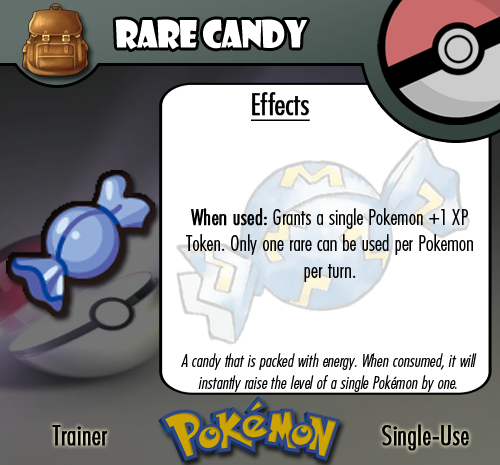
<style>
.page{position:relative;width:500px;height:465px;background:#ffffff}
.page>*{position:absolute;margin:0}
.t1{font:36.7px "ShowcardGothic-Reg";letter-spacing:-0.025em;color:#ffffff;scale:0.91 1}
.t2{font:22.2px "FuturaCondensedBQ-Light";color:#010101}
.t3{font:27.8px "FuturaCondensedBQ-Light";color:#010101;font-weight:bold}
.t4{font:30.6px "FuturaCondensedBQ-Light";color:#010101;font-weight:bold;text-decoration:underline}
.t5{font:22.2px "FuturaCondensedBQ-Light";color:#010101;font-weight:bold}
.t6{font:18.1px "FuturaCondensedBQ-Light";color:#010101;font-style:italic}
</style>
<div class="page">
<p class="t1" style="left:115px;top:19px;width:193px;height:31px">Rare Candy</p>
<p class="t2" style="left:186px;top:92px;width:287px;height:190px"><span class="t3">  </span><span class="t4">Effects<br><br><br><br><br><br><br></span><span class="t5">When used: </span>Grants a single Pokemon +1 XP Token. Only one rare can be used per Pokemon per turn.</p>
<p class="t6" style="left:181px;top:353px;width:296px;height:39px;text-align:center">A candy that is packed with energy. When consumed, it will instantly raise the level of a single Pokémon by one.</p>
<p class="t3" style="left:52px;top:425px;width:55px;height:21px">Trainer</p>
<p class="t3" style="left:382px;top:424px;width:87px;height:27px">Single-Use</p>
</div>
